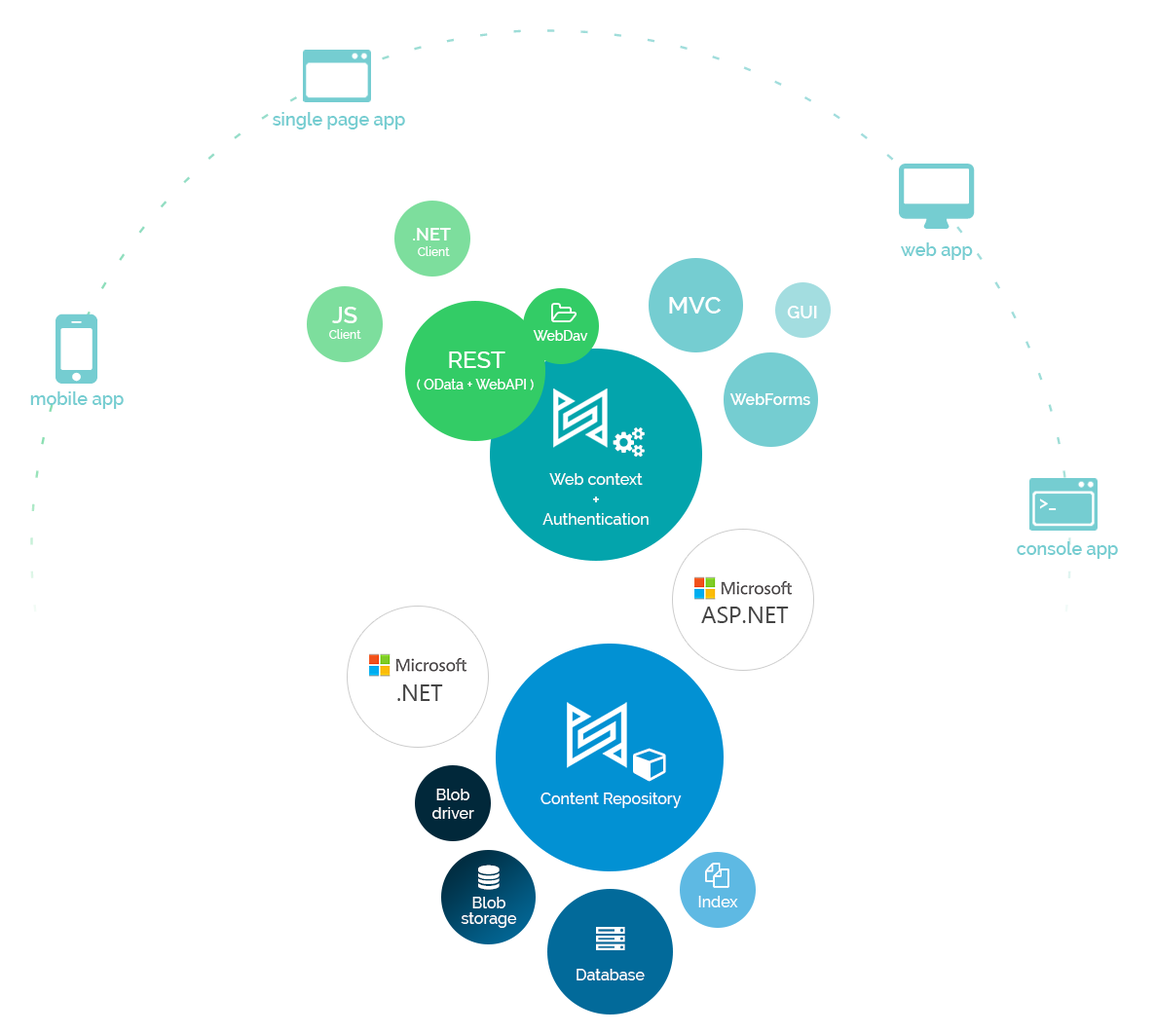
<style>
.page{position:relative;width:1155px;height:1033px;background:#ffffff}
.page>*{position:absolute;margin:0}
.t1{font:17.5px "Raleway-SemiBold";color:#75cdd1}
.t2{font:11.7px/15.6px "Raleway-Medium";color:#ffffff}
.t3{font:17.5px/15.6px "Raleway-SemiBold";color:#ffffff}
.t4{font:24.3px "Raleway-SemiBold";color:#ffffff}
.t5{font:17.5px "Raleway-SemiBold";color:#ffffff}
.t6{font:23.4px/15.6px "Raleway-SemiBold";color:#ffffff}
.t7{font:13.6px "Raleway-Medium";color:#ffffff}
.t8{font:23.4px "Raleway-Medium";color:#ffffff}
.t9{font:15.6px "Raleway-SemiBold";color:#ffffff}
.t10{font:15.6px "Raleway-Medium";color:#ffffff}
.t11{font:17.5px "Raleway-Medium";color:#ffffff}
.t12{font:23.4px "SegoeUI";color:#444444}
.t13{font:15.6px/15.6px "Raleway-Medium";color:#ffffff}
</style>
<div class="page">
<p class="t1" style="left:273px;top:112px;width:132px;height:17px">single page app</p>
<p class="t2" style="left:413px;top:228px;width:38px;height:28px;text-align:center"><span class="t3">.NET <br></span>Client</p>
<p class="t1" style="left:900px;top:242px;width:72px;height:18px">web app</p>
<p class="t4" style="left:669px;top:297px;width:51px;height:16px">MVC</p>
<p class="t5" style="left:787px;top:306px;width:30px;height:12px">GUI</p>
<p class="t2" style="left:329px;top:307px;width:32px;height:32px;text-align:center"><span class="t6">JS<br></span>Client</p>
<p class="t7" style="left:532px;top:330px;width:56px;height:11px">WebDav</p>
<p class="t8" style="left:449px;top:351px;width:56px;height:17px">REST</p>
<p class="t7" style="left:417px;top:379px;width:116px;height:11px">( OData + WebAPI )</p>
<p class="t1" style="left:30px;top:391px;width:94px;height:18px">mobile app</p>
<p class="t9" style="left:729px;top:393px;width:81px;height:12px">WebForms</p>
<p class="t10" style="left:542px;top:473px;width:106px;height:52px;text-align:center">Web context<br><span class="t11">+<br></span>Authentication</p>
<p class="t5" style="left:1039px;top:498px;width:17px;height:12px">&gt;_</p>
<p class="t1" style="left:1016px;top:541px;width:102px;height:18px">console app</p>
<p class="t12" style="left:701px;top:606px;width:88px;height:17px">ASP.NET</p>
<p class="t12" style="left:397px;top:684px;width:46px;height:17px">.NET</p>
<p class="t10" style="left:432px;top:789px;width:42px;height:30px;text-align:center">Blob<br>driver</p>
<p class="t10" style="left:540px;top:792px;width:141px;height:16px">Content Repository</p>
<p class="t13" style="left:460px;top:897px;width:57px;height:31px;text-align:center">Blob storage</p>
<p class="t10" style="left:698px;top:896px;width:40px;height:11px">Index</p>
<p class="t10" style="left:576px;top:969px;width:68px;height:11px">Database</p>
</div>
